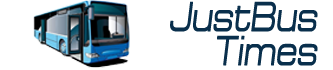
<style>
.page{position:relative;width:333px;height:70px;background:#ffffff}
.page>*{position:absolute;margin:0}
.t1{font:41.6px/34px "Europe_Ext-Oblique";color:#092f4c;font-weight:bold;scale:0.67 1}
</style>
<div class="page">
<p class="t1" style="left:170px;top:1px;width:148px;height:65px;text-align:right">JustBus<br>Times</p>
</div>
